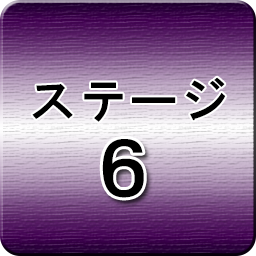
<style>
.page{position:relative;width:256px;height:256px}
.page>*{position:absolute;margin:0}
.t1{font:48px "HGSGothicE";letter-spacing:0.05em;color:#000000}
.t2{font:72px "HGSGothicE";letter-spacing:0.05em;color:#000000}
</style>
<div class="page">
<p class="t1" style="left:32px;top:77px;width:194px;height:45px">ステージ</p>
<p class="t2" style="left:102px;top:139px;width:42px;height:59px">６</p>
</div>
